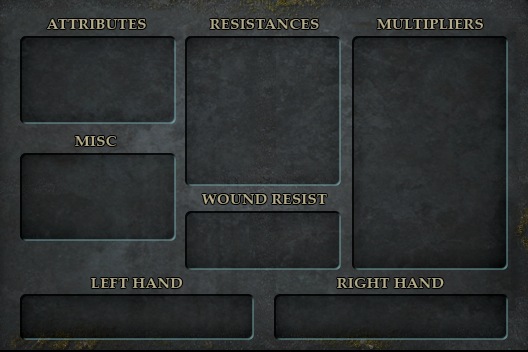
<style>
.page{position:relative;width:528px;height:352px}
.page>*{position:absolute;margin:0}
.t1{font:15px "PalatinoLinotype-Bold";letter-spacing:0.02em;color:#a9a181}
.t2{font:15px "PalatinoLinotype-Bold";letter-spacing:0.02em;color:#a8a080}
.t3{font:15px "PalatinoLinotype-Bold";letter-spacing:0.02em;color:#aea685}
.t4{font:15px "PalatinoLinotype-Bold";letter-spacing:0.02em;color:#ada584}
.t5{font:15px "PalatinoLinotype-Bold";letter-spacing:0.02em;color:#aba383}
.t6{font:15px "PalatinoLinotype-Bold";letter-spacing:0.02em;color:#a9a282}
</style>
<div class="page">
<p class="t1" style="left:47px;top:19px;width:99px;height:10px">ATTRIBUTES</p>
<p class="t2" style="left:210px;top:19px;width:109px;height:10px">RESISTANCES</p>
<p class="t3" style="left:377px;top:19px;width:106px;height:10px">MULTIPLIERS</p>
<p class="t3" style="left:75px;top:136px;width:42px;height:10px">MISC</p>
<p class="t4" style="left:202px;top:194px;width:125px;height:10px">WOUND RESIST</p>
<p class="t5" style="left:91px;top:278px;width:92px;height:10px">LEFT HAND</p>
<p class="t6" style="left:337px;top:278px;width:107px;height:10px">RIGHT HAND</p>
</div>
